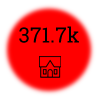
<style>
.page{position:relative;width:100px;height:100px;background:#ff0000}
.page>*{position:absolute;margin:0}
.t1{font:36px "RobotoSlab-Regular";color:#000000}
</style>
<div class="page">
<p class="t1" style="left:19px;top:26px;width:60px;height:17px">371.7k</p>
</div>
